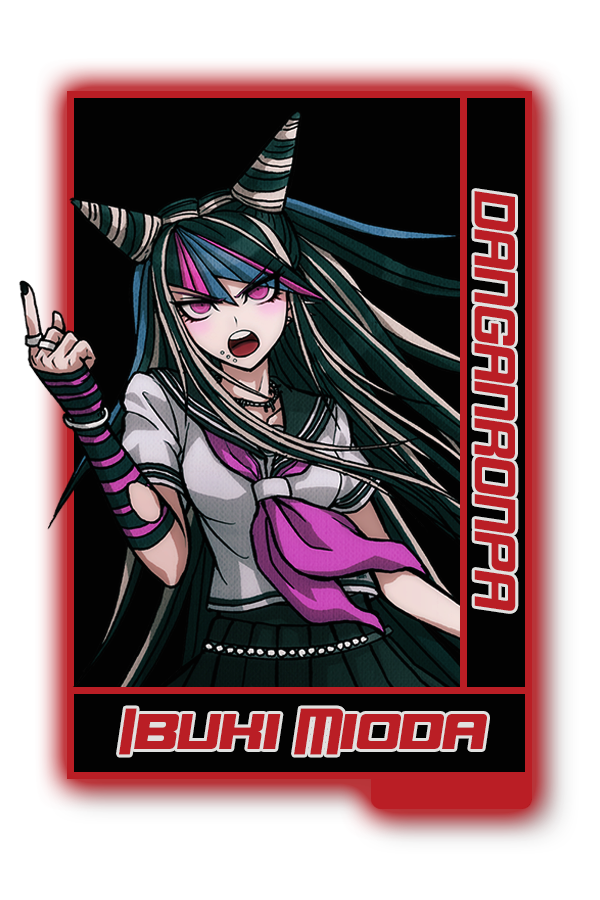
<style>
.page{position:relative;width:600px;height:900px;background:#020202}
.page>*{position:absolute;margin:0}
.t1{font:48.8px "DorBlue";color:#bb2c2e}
.t2{font:55.4px "DorBlue";color:#bb2c2e}
</style>
<div class="page">
<p class="t1" style="left:474px;top:191px;width:42px;height:420px;rotate:90deg">DANGANRONPA</p>
<p class="t2" style="left:119px;top:708px;width:368px;height:47px">Ibuki Mioda</p>
</div>
